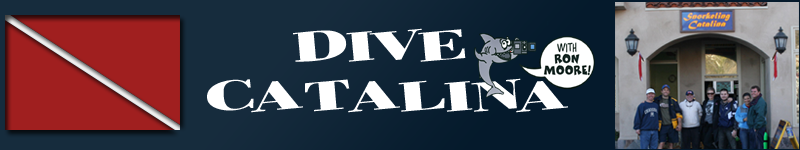
<style>
.page{position:relative;width:800px;height:150px}
.page>*{position:absolute;margin:0}
.t1{font:48px "HELTERSKELTER";color:#ffffff}
</style>
<div class="page">
<p class="t1" style="left:293px;top:28px;width:173px;height:34px">DIVE</p>
<p class="t1" style="left:207px;top:78px;width:361px;height:35px">CATALINA</p>
</div>
